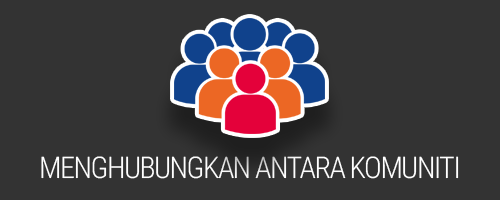
<style>
.page{position:relative;width:500px;height:200px;background:#333333}
.page>*{position:absolute;margin:0}
.t1{font:30px "RobotoCondensed-Light";letter-spacing:-0.05em;color:#ffffff}
</style>
<div class="page">
<p class="t1" style="left:41px;top:156px;width:418px;height:23px">MENGHUBUNGKAN ANTARA KOMUNITI</p>
</div>
